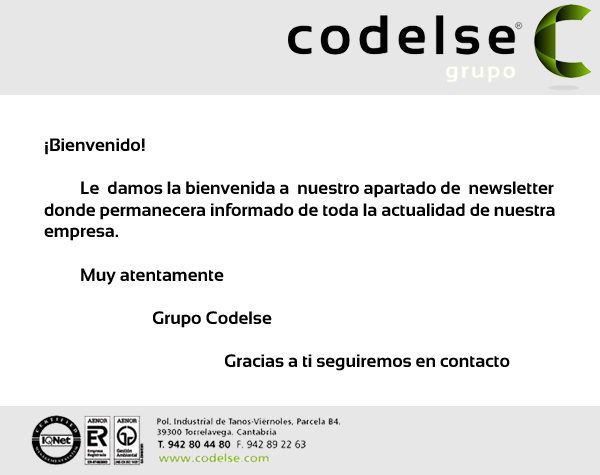
<style>
.page{position:relative;width:600px;height:475px;background:#ffffff}
.page>*{position:absolute;margin:0}
.t1{font:18px "Sansation-Bold";color:#000000}
</style>
<div class="page">
<p class="t1" style="left:44px;top:138px;width:511px;height:233px">¡Bienvenido!<br><br> Le  damos la bienvenida a  nuestro apartado de  newsletter <br>donde permanecera informado de toda la actualidad de nuestra <br>empresa.<br><br> Muy atentamente<br>  <br>   Grupo Codelse<br><br>     Gracias a ti seguiremos en contacto</p>
</div>
